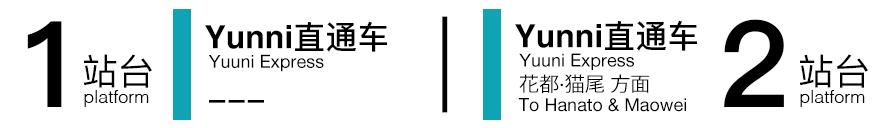
<style>
.page{position:relative;width:896px;height:128px;background:#ffffff}
.page>*{position:absolute;margin:0}
.t1{font:96px "PingFangSC-Light";color:#000000}
.t2{font:120px "PingFangSC-Semibold";color:#000000}
.t3{font:32px "Helvetica-Bold";color:#000000}
.t4{font:32px "PingFangSC-Medium";color:#000000}
.t5{font:36px "PingFangSC-Regular";color:#000000}
.t6{font:18px "HelveticaNeue";color:#000000}
.t7{font:20px "KozGoPr6N-Regular";color:#000000}
.t8{font:20px "HelveticaNeue";color:#000000}
.t9{font:18px "Helvetica-Light";color:#000000}
</style>
<div class="page">
<p class="t1" style="left:442px;top:16px;width:6px;height:97px">|</p>
<p class="t2" style="left:27px;top:21px;width:35px;height:86px">1</p>
<p class="t3" style="left:205px;top:21px;width:182px;height:31px">Yunni<span class="t4">直通车</span></p>
<p class="t3" style="left:515px;top:20px;width:182px;height:31px">Yunni<span class="t4">直通车</span></p>
<p class="t2" style="left:724px;top:19px;width:60px;height:88px">2</p>
<p class="t5" style="left:83px;top:54px;width:69px;height:34px">站台</p>
<p class="t6" style="left:208px;top:54px;width:116px;height:18px">Yuuni Express</p>
<p class="t6" style="left:519px;top:53px;width:115px;height:17px">Yuuni Express</p>
<p class="t5" style="left:799px;top:54px;width:69px;height:34px">站台</p>
<p class="t7" style="left:519px;top:74px;width:131px;height:20px">花都<span class="t8">·</span>猫尾 方面</p>
<p class="t9" style="left:84px;top:90px;width:65px;height:17px">platform</p>
<p class="t4" style="left:209px;top:100px;width:55px;height:3px">---</p>
<p class="t6" style="left:518px;top:98px;width:168px;height:14px">To Hanato &amp; Maowei</p>
<p class="t9" style="left:800px;top:90px;width:65px;height:17px">platform</p>
</div>
